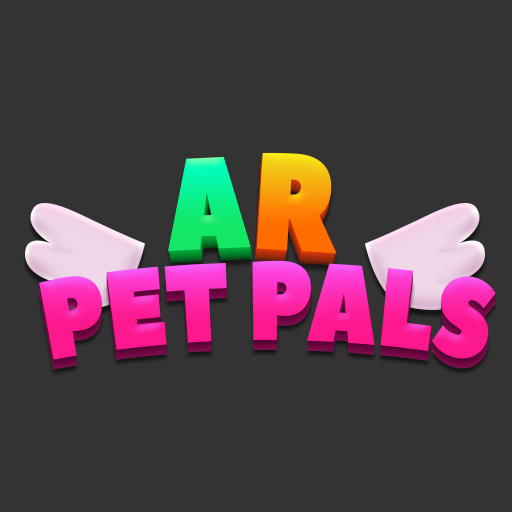
<style>
.page{position:relative;width:512px;height:512px;background:#333333}
.page>*{position:absolute;margin:0}
.t1{font:130.3px "PeaceSans";text-transform:uppercase;scale:0.85 1}
.t2{font:136.5px "PeaceSans";text-transform:uppercase;scale:0.85 1}
.t3{font:111.7px "PeaceSans";text-transform:uppercase;scale:0.77 1}
</style>
<div class="page">
<p class="t1" style="left:168px;top:156px;width:83px;height:95px;rotate:-3deg">A</p>
<p class="t2" style="left:256px;top:152px;width:81px;height:102px;rotate:3deg">R</p>
<p class="t3" style="left:39px;top:260px;width:457px;height:100px">PET PALS</p>
</div>
